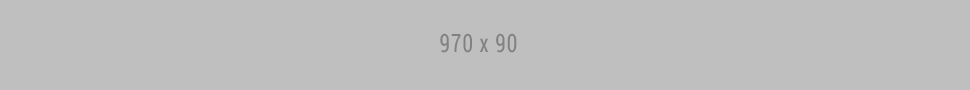
<style>
.page{position:relative;width:970px;height:90px;background:#bfbfbf}
.page>*{position:absolute;margin:0}
.t1{font:25px "Roboto-Condensed";letter-spacing:0.07em;color:#818181;scale:0.8 1}
</style>
<div class="page">
<p class="t1" style="left:440px;top:33px;width:77px;height:20px">970 x 90</p>
</div>
